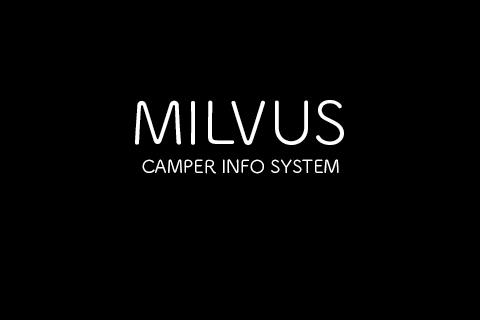
<style>
.page{position:relative;width:480px;height:320px;background:#000000}
.page>*{position:absolute;margin:0}
.t1{font:60px "TsukuARdGothic-Regular";color:#ffffff}
.t2{font:18px "TsukuARdGothic-Regular";color:#ffffff}
</style>
<div class="page">
<p class="t1" style="left:135px;top:100px;width:209px;height:45px">MILVUS</p>
<p class="t2" style="left:142px;top:159px;width:197px;height:15px">CAMPER INFO SYSTEM</p>
</div>
